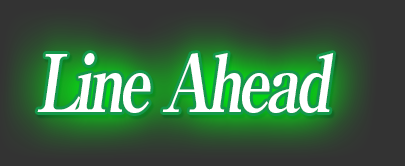
<style>
.page{position:relative;width:405px;height:166px;background:#333333}
.page>*{position:absolute;margin:0}
.t1{font:80px "RyuminPro-ExBold";letter-spacing:-0.08em;color:#ffffff;font-style:italic;scale:0.8 1}
.t2{font:80px "RyuminPro-ExBold";letter-spacing:-0.075em;color:#ffffff;font-style:italic;scale:0.8 1}
</style>
<div class="page">
<p class="t1" style="left:37px;top:53px;width:297px;height:60px">Li<span class="t2">n</span>e Ahead</p>
</div>
